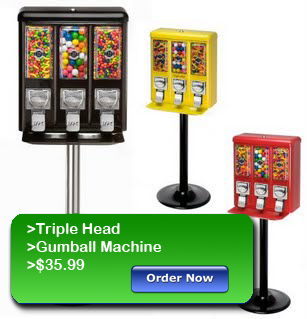
<style>
.page{position:relative;width:307px;height:319px;background:#ffffff}
.page>*{position:absolute;margin:0}
.t1{font:15px "ArialRoundedMTBold";color:#ffffff}
</style>
<div class="page">
<p class="t1" style="left:27px;top:223px;width:135px;height:50px">&gt;Triple Head <br>&gt;Gumball Machine <br>&gt;$35.99</p>
</div>
